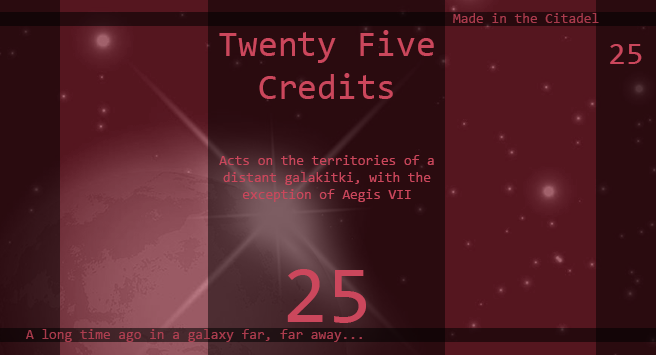
<style>
.page{position:relative;width:656px;height:355px;background:#2a0b0f}
.page>*{position:absolute;margin:0}
.t1{font:14px "Consolas";color:#ab3b4d}
.t2{font:36px "Consolas";color:#cb475c}
.t3{font:32px "Consolas";color:#cb475c}
.t4{font:14px "Consolas";color:#cb475c}
.t5{font:82px "Consolas";color:#cb475c}
.t6{font:14px "Consolas";color:#aa3c4e}
</style>
<div class="page">
<p class="t1" style="left:453px;top:13px;width:146px;height:10px">Made in the Citadel</p>
<p class="t2" style="left:219px;top:30px;width:215px;height:69px;text-align:center">Twenty Five<br>Credits</p>
<p class="t3" style="left:610px;top:44px;width:32px;height:20px">25</p>
<p class="t4" style="left:219px;top:155px;width:215px;height:47px;text-align:center">Acts on the territories of a distant galakitki, with the exception of Aegis VII</p>
<p class="t5" style="left:287px;top:269px;width:79px;height:54px">25</p>
<p class="t6" style="left:26px;top:329px;width:336px;height:13px">A long time ago in a galaxy far, far away...</p>
</div>
